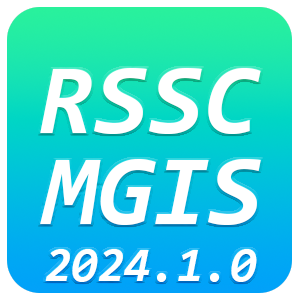
<style>
.page{position:relative;width:300px;height:300px;background:#ffffff}
.page>*{position:absolute;margin:0}
.t1{font:100px "Consolas-BoldItalic";color:#ffffff}
.t2{font:48px "Consolas-BoldItalic";color:#ffffff}
</style>
<div class="page">
<p class="t1" style="left:40px;top:68px;width:221px;height:66px">RSSC</p>
<p class="t1" style="left:40px;top:159px;width:221px;height:66px">MGIS</p>
<p class="t2" style="left:45px;top:249px;width:212px;height:33px">2024.1.0</p>
</div>
